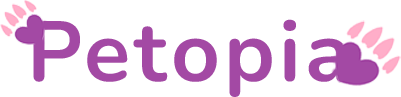
<style>
.page{position:relative;width:401px;height:97px;background:#ffffff}
.page>*{position:absolute;margin:0}
.t1{font:85px "Nunito-Bold";letter-spacing:0.05em;color:#a349a4}
</style>
<div class="page">
<p class="t1" style="left:33px;top:19px;width:314px;height:78px">Petopia</p>
</div>
